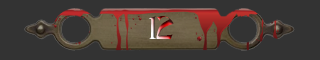
<style>
.page{position:relative;width:320px;height:60px;background:#333333}
.page>*{position:absolute;margin:0}
.t1{font:30px "ArthurGothic"}
</style>
<div class="page">
<p class="t1" style="left:149px;top:16px;width:25px;height:23px">12</p>
</div>
